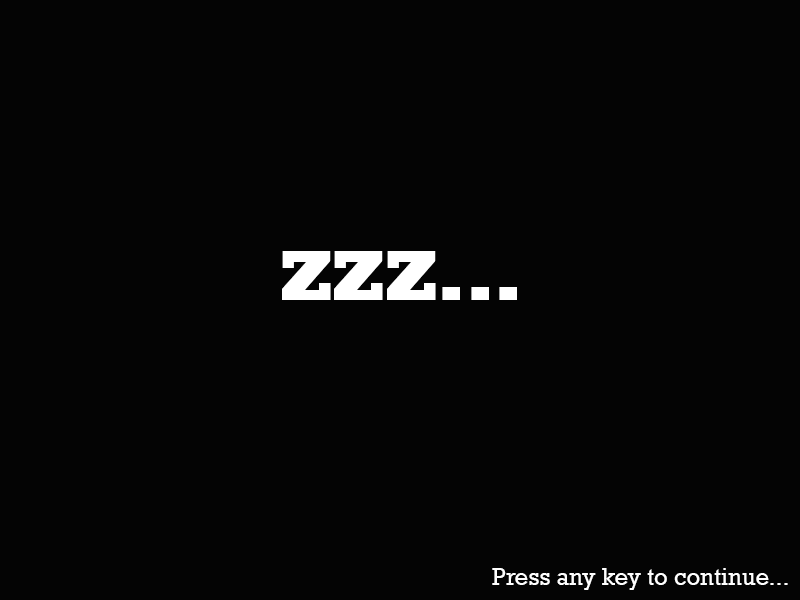
<style>
.page{position:relative;width:800px;height:600px;background:#040404}
.page>*{position:absolute;margin:0}
.t1{font:72px "Rockwell-ExtraBold";color:#ffffff}
.t2{font:24px "Rockwell";color:#ffffff}
</style>
<div class="page">
<p class="t1" style="left:282px;top:251px;width:235px;height:49px">ZZZ...</p>
<p class="t2" style="left:492px;top:568px;width:296px;height:22px">Press any key to continue...</p>
</div>
